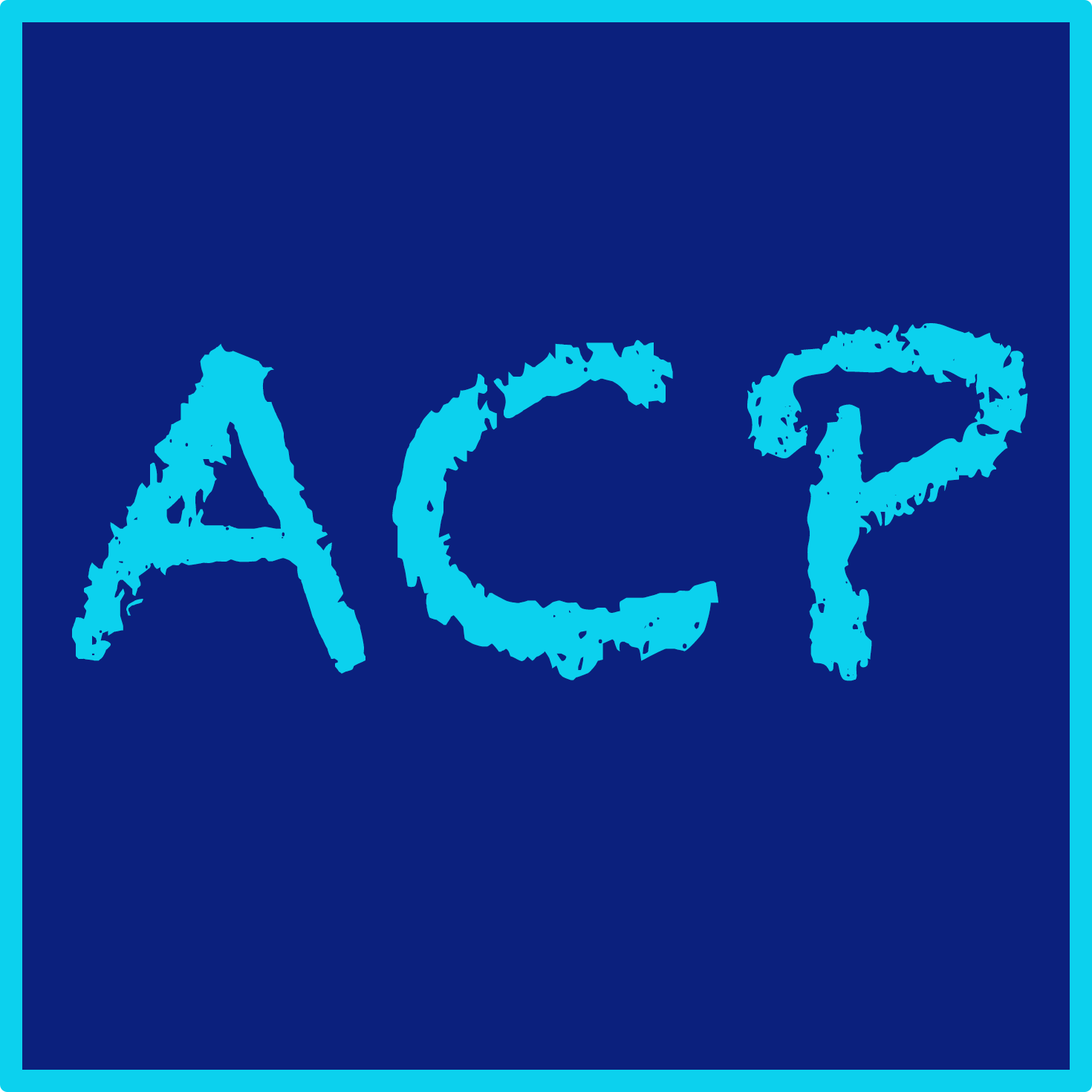
<style>
.page{position:relative;width:1092px;height:1092px;background:#0b207d}
.page>*{position:absolute;margin:0}
.t1{font:430.3px "Chalkduster";color:#0cd1ee}
</style>
<div class="page">
<p class="t1" style="left:72px;top:323px;width:956px;height:358px">ACP</p>
</div>
